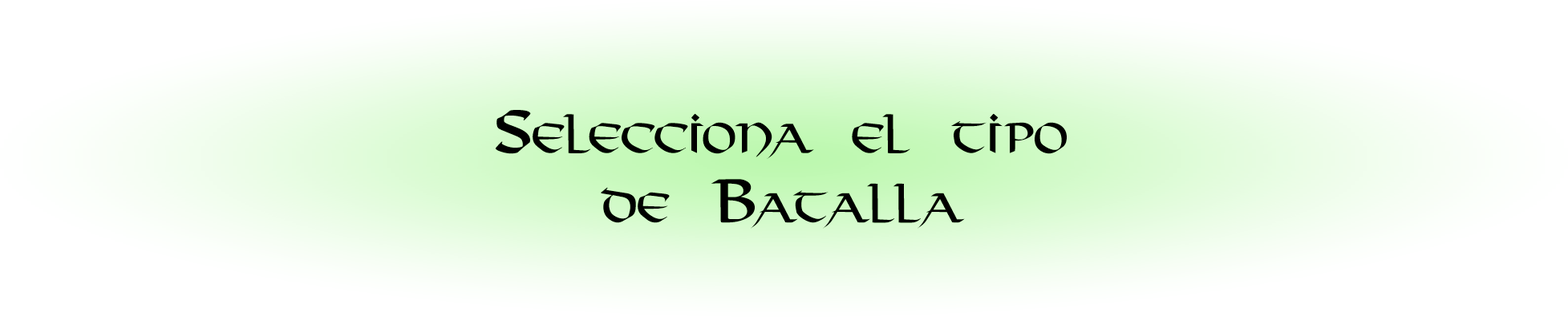
<style>
.page{position:relative;width:1568px;height:317px;background:#ffffff}
.page>*{position:absolute;margin:0}
.t1{font:57.7px "Viking-Medium";color:#000000;font-variant:small-caps}
</style>
<div class="page">
<p class="t1" style="left:496px;top:110px;width:571px;height:119px;text-align:center">Selecciona el tipo<br>de Batalla</p>
</div>
